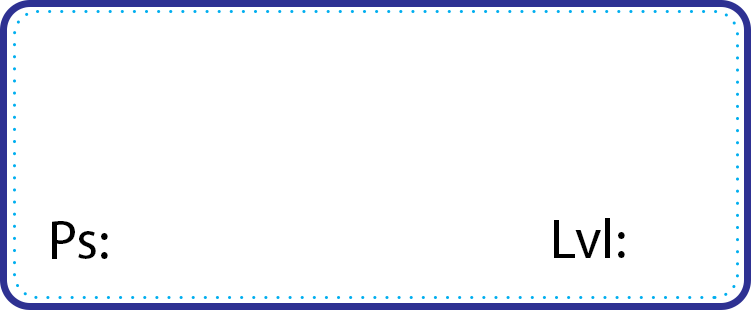
<style>
.page{position:relative;width:751px;height:310px;background:#ffffff}
.page>*{position:absolute;margin:0}
.t1{font:55.8px "MyriadPro-Regular";color:#000000}
</style>
<div class="page">
<p class="t1" style="left:52px;top:221px;width:56px;height:38px">Ps:</p>
<p class="t1" style="left:554px;top:218px;width:71px;height:40px">Lvl:</p>
</div>
